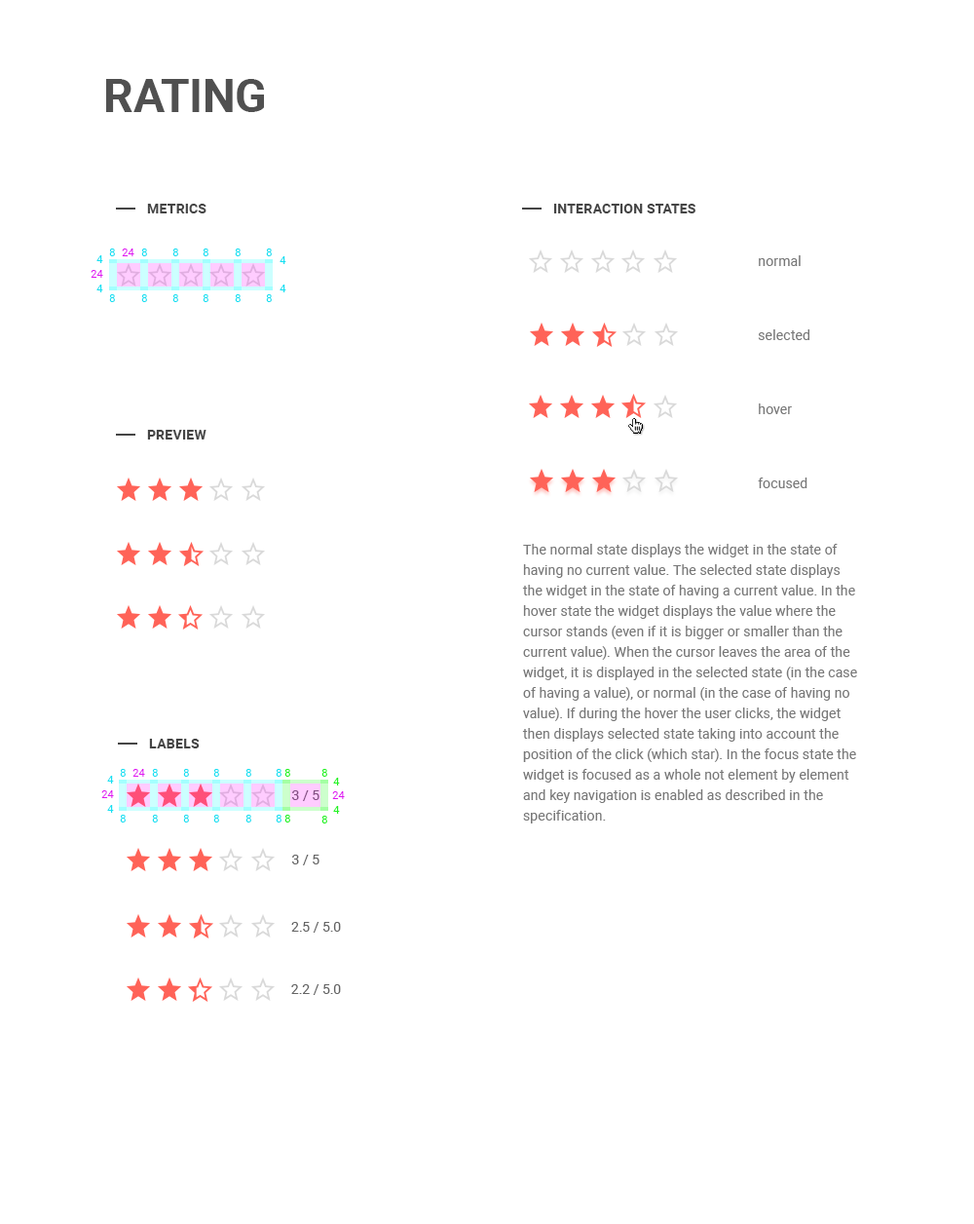
<style>
.page{position:relative;width:974px;height:1224px;background:#ffffff}
.page>*{position:absolute;margin:0}
.t1{font:46.8px "Roboto-Bold";color:#505050;text-transform:uppercase}
.t2{font:13.6px "Roboto-Bold";letter-spacing:0.01em;color:#454545;text-transform:uppercase}
.t3{font:10.7px "Roboto-Regular";letter-spacing:0.01em;color:#18e0f2}
.t4{font:10.7px "Roboto-Regular";letter-spacing:0.01em;color:#e018f2}
.t5{font:13.6px/74.1px "Roboto-Regular";letter-spacing:0.01em;color:#787878}
.t6{font:13.6px/20.5px "Roboto-Regular";letter-spacing:0.01em;color:#787878}
.t7{font:10.7px "Roboto-Regular";letter-spacing:0.01em;color:#22f222}
.t8{font:13.6px "Roboto-Regular";color:#845184}
.t9{font:13.6px "Roboto-Regular";color:#656565}
</style>
<div class="page">
<p class="t1" style="left:106px;top:79px;width:158px;height:33px">Rating</p>
<p class="t2" style="left:147px;top:204px;width:60px;height:9px">metrics</p>
<p class="t2" style="left:553px;top:204px;width:143px;height:9px">interaction states</p>
<p class="t3" style="left:96px;top:255px;width:7px;height:8px">4</p>
<p class="t3" style="left:109px;top:248px;width:6px;height:8px">8</p>
<p class="t4" style="left:122px;top:248px;width:12px;height:8px">24</p>
<p class="t3" style="left:141px;top:248px;width:6px;height:8px">8</p>
<p class="t3" style="left:172px;top:248px;width:6px;height:8px">8</p>
<p class="t3" style="left:203px;top:248px;width:6px;height:8px">8</p>
<p class="t3" style="left:235px;top:248px;width:6px;height:8px">8</p>
<p class="t3" style="left:266px;top:248px;width:6px;height:8px">8</p>
<p class="t3" style="left:280px;top:256px;width:6px;height:8px">4</p>
<p class="t5" style="left:758px;top:255px;width:52px;height:233px">normal<br>selected<br>hover<br>focused</p>
<p class="t4" style="left:91px;top:270px;width:12px;height:8px">24</p>
<p class="t3" style="left:96px;top:285px;width:7px;height:7px">4</p>
<p class="t3" style="left:280px;top:285px;width:6px;height:7px">4</p>
<p class="t3" style="left:109px;top:294px;width:6px;height:8px">8</p>
<p class="t3" style="left:141px;top:294px;width:6px;height:8px">8</p>
<p class="t3" style="left:172px;top:294px;width:6px;height:8px">8</p>
<p class="t3" style="left:203px;top:294px;width:6px;height:8px">8</p>
<p class="t3" style="left:235px;top:294px;width:6px;height:8px">8</p>
<p class="t3" style="left:266px;top:294px;width:6px;height:8px">8</p>
<p class="t2" style="left:147px;top:430px;width:60px;height:9px">preview</p>
<p class="t6" style="left:522px;top:544px;width:335px;height:279px">The normal state displays the widget in the state of having no current value. The selected state displays the widget in the state of having a current value. In the hover state the widget displays the value where the cursor stands (even if it is bigger or smaller than the current value). When the cursor leaves the area of the widget, it is displayed in the selected state (in the case of having a value), or normal (in the case of having no value). If during the hover the user clicks, the widget then displays selected state taking into account the position of the click (which star). In the focus state the widget is focused as a whole not element by element and key navigation is enabled as described in the specification.</p>
<p class="t2" style="left:149px;top:739px;width:51px;height:9px">labels</p>
<p class="t3" style="left:120px;top:769px;width:6px;height:8px">8</p>
<p class="t4" style="left:133px;top:769px;width:12px;height:8px">24</p>
<p class="t3" style="left:152px;top:769px;width:6px;height:8px">8</p>
<p class="t3" style="left:183px;top:769px;width:6px;height:8px">8</p>
<p class="t3" style="left:213px;top:769px;width:6px;height:8px">8</p>
<p class="t3" style="left:246px;top:769px;width:5px;height:8px">8</p>
<p class="t3" style="left:276px;top:769px;width:6px;height:8px">8</p>
<p class="t7" style="left:285px;top:769px;width:5px;height:8px">8</p>
<p class="t7" style="left:322px;top:769px;width:5px;height:8px">8</p>
<p class="t3" style="left:107px;top:776px;width:7px;height:7px">4</p>
<p class="t7" style="left:333px;top:778px;width:7px;height:7px">4</p>
<p class="t4" style="left:101px;top:790px;width:13px;height:8px">24</p>
<p class="t8" style="left:292px;top:790px;width:28px;height:11px">3 / 5</p>
<p class="t4" style="left:332px;top:791px;width:13px;height:8px">24</p>
<p class="t3" style="left:107px;top:805px;width:7px;height:8px">4</p>
<p class="t7" style="left:333px;top:806px;width:7px;height:8px">4</p>
<p class="t3" style="left:120px;top:815px;width:6px;height:7px">8</p>
<p class="t3" style="left:152px;top:815px;width:6px;height:7px">8</p>
<p class="t3" style="left:183px;top:815px;width:6px;height:7px">8</p>
<p class="t3" style="left:213px;top:815px;width:6px;height:7px">8</p>
<p class="t3" style="left:246px;top:815px;width:5px;height:7px">8</p>
<p class="t3" style="left:276px;top:815px;width:6px;height:7px">8</p>
<p class="t7" style="left:285px;top:815px;width:5px;height:7px">8</p>
<p class="t7" style="left:322px;top:816px;width:5px;height:7px">8</p>
<p class="t9" style="left:292px;top:855px;width:28px;height:10px">3 / 5</p>
<p class="t9" style="left:291px;top:922px;width:50px;height:10px">2.5 / 5.0</p>
<p class="t9" style="left:291px;top:984px;width:50px;height:11px">2.2 / 5.0</p>
</div>
